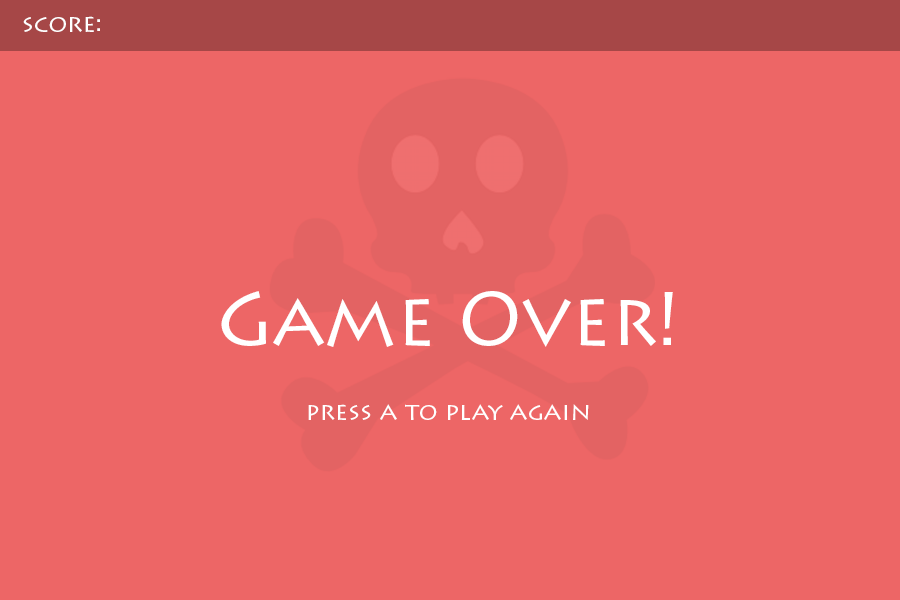
<style>
.page{position:relative;width:900px;height:600px;background:#ed6666}
.page>*{position:absolute;margin:0}
.t1{font:25px "LithosPro-Regular";color:#ffffff}
.t2{font:75px "LithosPro-Regular";color:#ffffff}
</style>
<div class="page">
<p class="t1" style="left:23px;top:16px;width:77px;height:16px">score:</p>
<p class="t1" style="left:221px;top:291px;width:452px;height:129px;text-align:center"><span class="t2">Game Over!<br><br></span>press a to play again</p>
</div>
